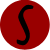
<style>
.page{position:relative;width:50px;height:50px;background:#990000}
.page>*{position:absolute;margin:0}
.t1{font:61.4px "Herculanum";color:#000000}
</style>
<div class="page">
<p class="t1" style="left:16px;top:4px;width:18px;height:42px">S</p>
</div>
